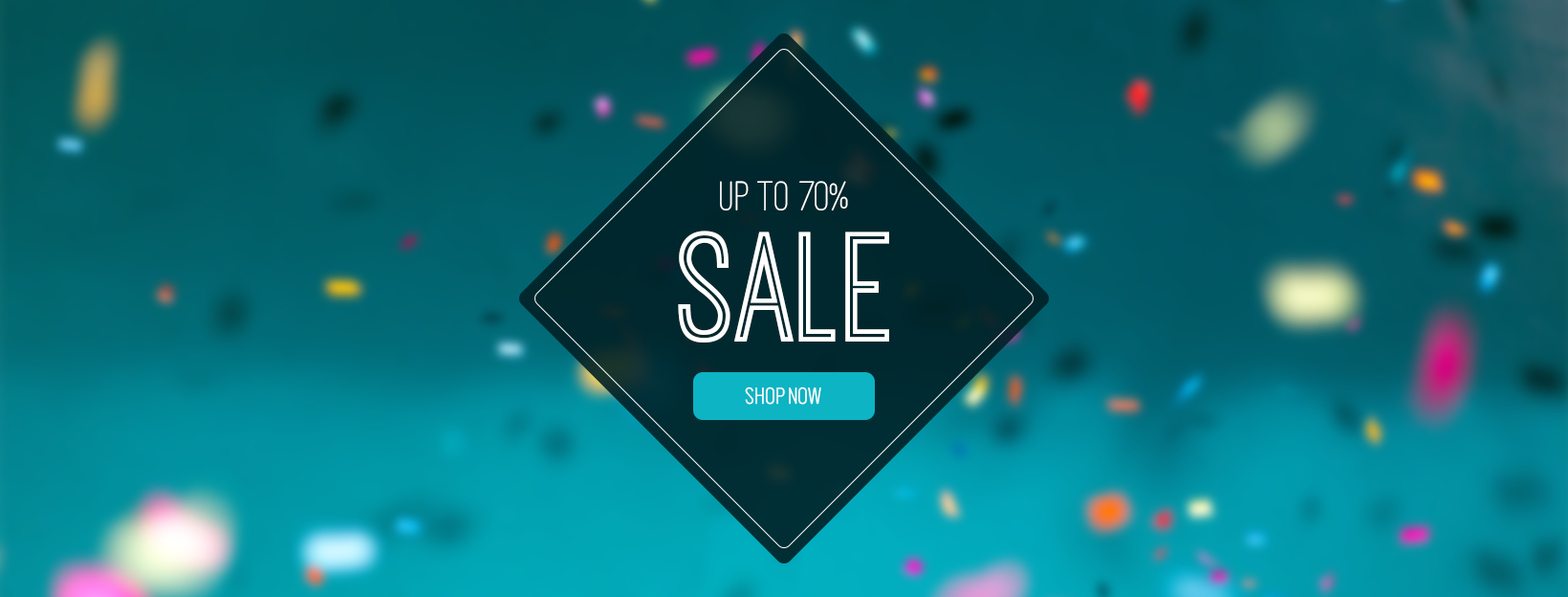
<style>
.page{position:relative;width:1568px;height:597px}
.page>*{position:absolute;margin:0}
.t1{font:43px "OstrichSansRounded-Medium";color:#ffffff}
.t2{font:162.5px "OstrichSansInline-Regular";color:#ffffff}
.t3{font:19.1px "Oswald-Light";color:#ffffff}
</style>
<div class="page">
<p class="t1" style="left:720px;top:181px;width:128px;height:29px">up to 70%</p>
<p class="t2" style="left:678px;top:230px;width:211px;height:112px">SALE</p>
<p class="t3" style="left:745px;top:386px;width:76px;height:18px">SHOP NOW</p>
</div>
